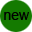
<style>
.page{position:relative;width:32px;height:32px;background:#147a00}
.page>*{position:absolute;margin:0}
.t1{font:14px "ArialMT";color:#000000}
</style>
<div class="page">
<p class="t1" style="left:4px;top:12px;width:25px;height:8px">new</p>
</div>
